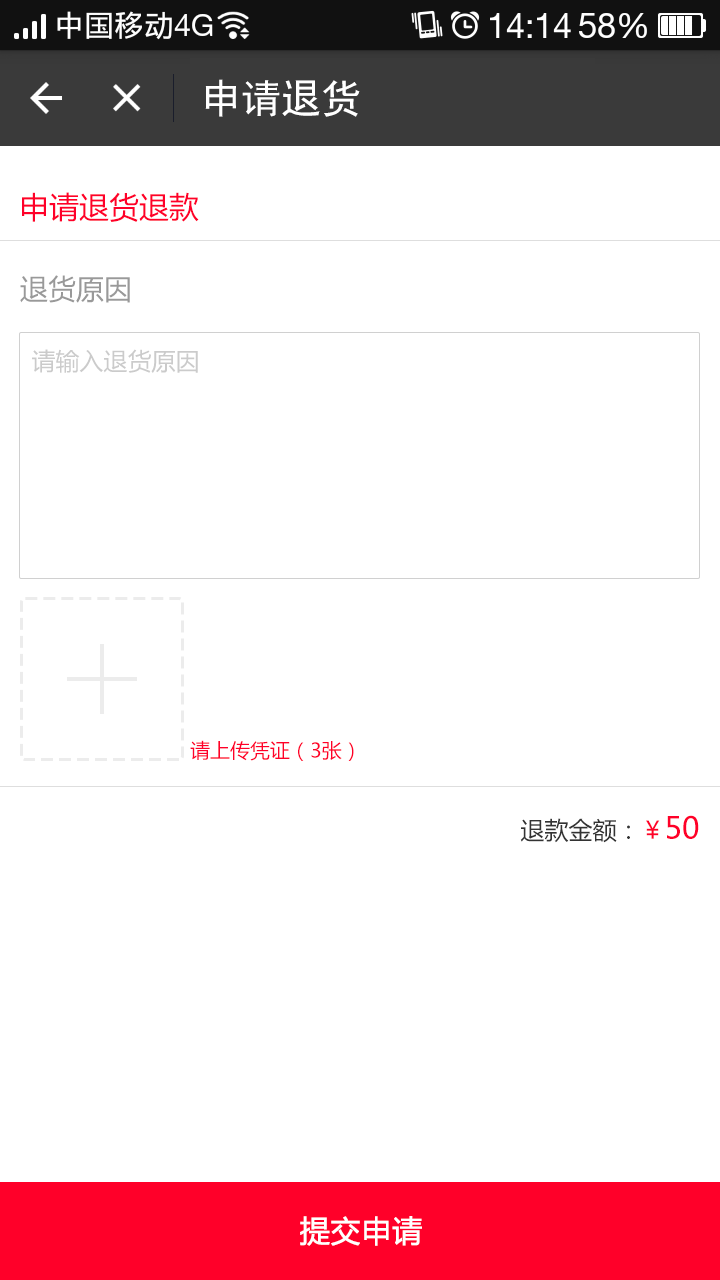
<style>
.page{position:relative;width:720px;height:1280px;background:#ffffff}
.page>*{position:absolute;margin:0}
.t1{font:40px "SimHei";color:#ffffff}
.t2{font:30px "MicrosoftYaHei";color:#ff0029}
.t3{font:28px "MicrosoftYaHei";color:#999999}
.t4{font:24px "MicrosoftYaHei";color:#cbcbcb}
.t5{font:20px "MicrosoftYaHei";color:#ff0029}
.t6{font:24px "MicrosoftYaHei";color:#333333}
.t7{font:24px "MicrosoftYaHei";color:#ff0029}
.t8{font:30px "MicrosoftYaHei";color:#ffffff;font-weight:bold}
</style>
<div class="page">
<p class="t1" style="left:205px;top:79px;width:155px;height:38px">申请退货</p>
<p class="t2" style="left:22px;top:192px;width:177px;height:30px">申请退货退款</p>
<p class="t3" style="left:20px;top:275px;width:110px;height:28px">退货原因</p>
<p class="t4" style="left:32px;top:349px;width:166px;height:24px">请输入退货原因</p>
<p class="t5" style="left:190px;top:740px;width:164px;height:21px">请上传凭证（3张）</p>
<p class="t6" style="left:520px;top:815px;width:179px;height:28px">退款金额：<span class="t7">￥</span><span class="t2">50</span></p>
<p class="t8" style="left:300px;top:1216px;width:122px;height:30px">提交申请</p>
</div>
